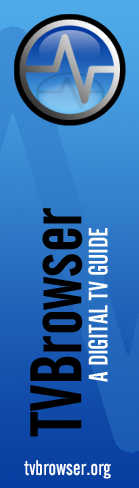
<style>
.page{position:relative;width:139px;height:488px}
.page>*{position:absolute;margin:0}
.t1{font:72.4px "AlternateGothicNo2BT-Regular";color:#000000}
.t2{font:26.5px "AlternateGothicNo2BT-Regular";color:#ffffff}
.t3{font:21px "AlternateGothicNo2BT-Regular";color:#ffffff}
</style>
<div class="page">
<p class="t1" style="left:30px;top:208px;width:53px;height:229px;rotate:-90deg">TVBrowser</p>
<p class="t2" style="left:88px;top:228px;width:20px;height:154px;rotate:-90deg">A DIGITAL TV GUIDE</p>
<p class="t3" style="left:24px;top:460px;width:87px;height:19px">tvbrowser.org</p>
</div>
